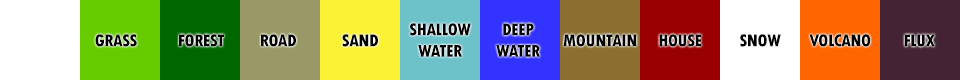
<style>
.page{position:relative;width:960px;height:80px}
.page>*{position:absolute;margin:0}
.t1{font:18px "TwCenMT-CondensedExtraBold";letter-spacing:-0.025em;color:#000000;text-transform:uppercase}
</style>
<div class="page">
<p class="t1" style="left:410px;top:23px;width:61px;height:34px;text-align:center">SHALLOW<br>WATER</p>
<p class="t1" style="left:496px;top:23px;width:44px;height:34px;text-align:center">DEEP<br>WATER</p>
<p class="t1" style="left:95px;top:34px;width:42px;height:13px">GRASS</p>
<p class="t1" style="left:179px;top:34px;width:45px;height:13px">forest</p>
<p class="t1" style="left:261px;top:34px;width:35px;height:13px">road</p>
<p class="t1" style="left:342px;top:34px;width:36px;height:13px">Sand</p>
<p class="t1" style="left:563px;top:34px;width:74px;height:13px">MOUNTAIN</p>
<p class="t1" style="left:659px;top:34px;width:43px;height:13px">HOUSE</p>
<p class="t1" style="left:740px;top:34px;width:41px;height:13px">SNOW</p>
<p class="t1" style="left:809px;top:34px;width:62px;height:13px">VOLCANO</p>
<p class="t1" style="left:904px;top:34px;width:31px;height:13px">FLUX</p>
</div>
